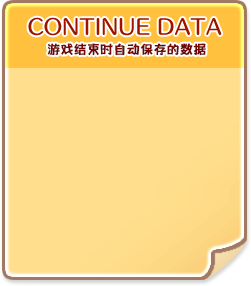
<style>
.page{position:relative;width:251px;height:286px;background:#ffdf8d}
.page>*{position:absolute;margin:0}
.t1{font:12.9px "shetumodengxiaofangti";color:#720707;font-weight:bold}
</style>
<div class="page">
<p class="t1" style="left:47px;top:43px;width:159px;height:13px">游戏结束时自动保存的数据</p>
</div>
